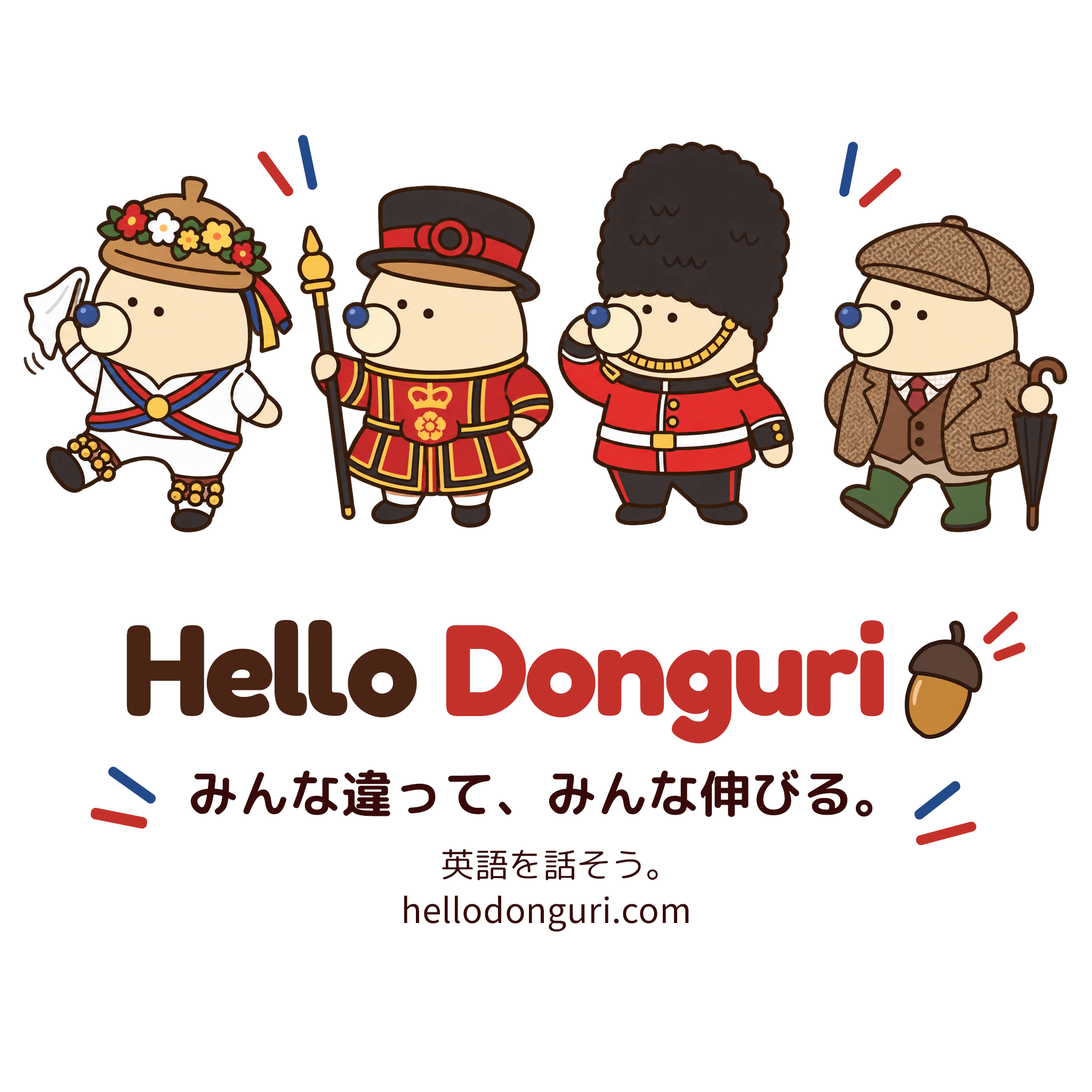
<style>
.page{position:relative;width:1092px;height:1092px;background:#ffffff}
.page>*{position:absolute;margin:0}
.t1{font:130.1px "Fredoka-Bold";letter-spacing:-0.025em;color:#c4312b}
.t2{font:130.1px "Fredoka-Bold";letter-spacing:-0.025em;color:#4a2414}
.t3{font:51.2px/65px "rounded-mplus-1c-bold";color:#380909}
.t4{font:34.1px/65px "rounded-mplus-1c-regular";color:#380909}
.t5{font:38.4px "SourceSansRoman-Regular";letter-spacing:0.01em;color:#380909}
</style>
<div class="page">
<p class="t1" style="left:126px;top:620px;width:841px;height:124px"><span class="t2">Hello </span>Donguri  .</p>
<p class="t3" style="left:190px;top:769px;width:683px;height:111px;text-align:center">みんな違って、みんな伸びる。<br><span class="t4">   英語を話そう。</span></p>
<p class="t5" style="left:404px;top:895px;width:285px;height:36px">hellodonguri.com</p>
</div>
